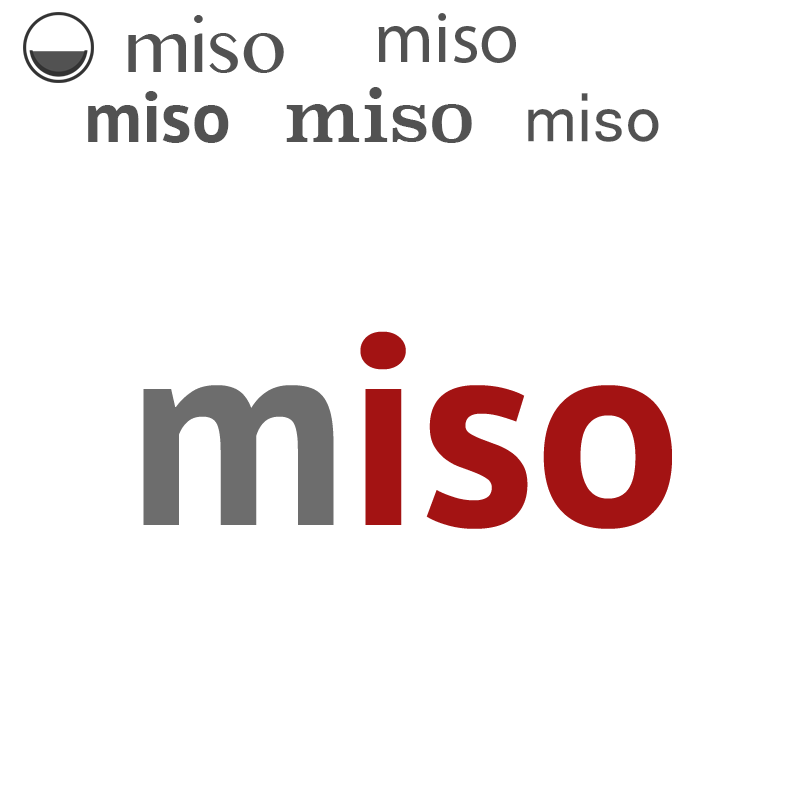
<style>
.page{position:relative;width:800px;height:800px;background:#ffffff}
.page>*{position:absolute;margin:0}
.t1{font:72px "MalayalamMN";color:#525252}
.t2{font:72px "MyriadPro-Regular";color:#525252}
.t3{font:72px "Superclarendon-Regular";color:#525252}
.t4{font:72px "PTSans-Bold";color:#525252}
.t5{font:72px "MS-PGothic";color:#525252}
.t6{font:272px "PTSans-Bold";color:#a31313}
.t7{font:272px "PTSans-Bold";color:#6d6d6d}
</style>
<div class="page">
<p class="t1" style="left:128px;top:15px;width:156px;height:58px">miso</p>
<p class="t2" style="left:378px;top:13px;width:138px;height:50px">miso</p>
<p class="t3" style="left:286px;top:87px;width:186px;height:56px">miso</p>
<p class="t4" style="left:88px;top:91px;width:141px;height:52px">miso</p>
<p class="t5" style="left:528px;top:93px;width:131px;height:49px">miso</p>
<p class="t6" style="left:143px;top:331px;width:529px;height:198px"><span class="t7">m</span>iso</p>
</div>
